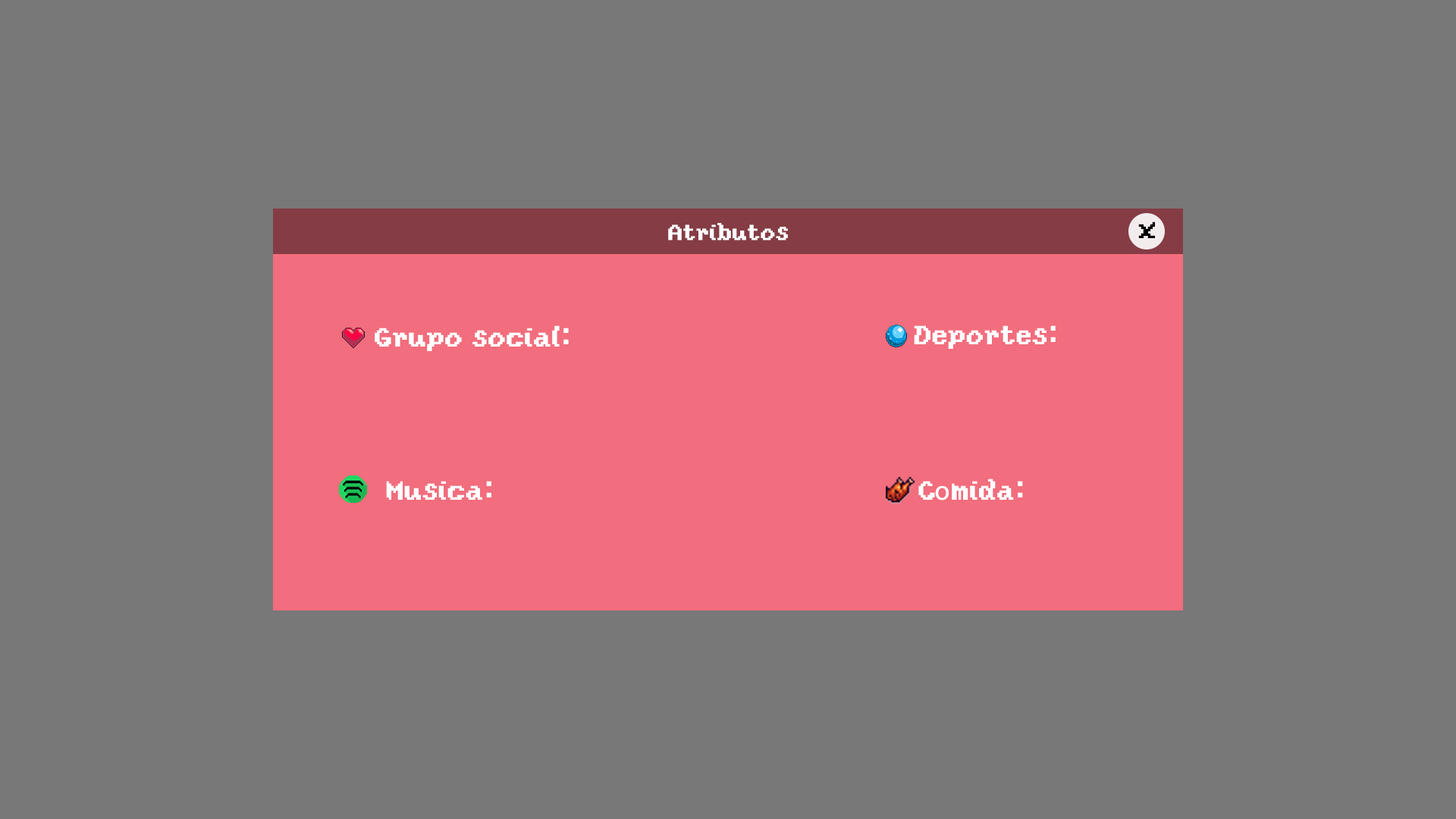
<style>
.page{position:relative;width:1456px;height:819px;background:#787878}
.page>*{position:absolute;margin:0}
.t1{font:27.3px "YosterIslandReg";color:#000000}
.t2{font:22.7px "YosterIslandReg";color:#ffffff}
.t3{font:27.3px "YosterIslandReg";color:#ffffff}
.t4{font:27.3px "MyriadPro-Regular";color:#ffffff}
</style>
<div class="page">
<p class="t1" style="left:1138px;top:221px;width:17px;height:17px">x</p>
<p class="t2" style="left:668px;top:223px;width:120px;height:17px">Atributos</p>
<p class="t3" style="left:375px;top:325px;width:194px;height:26px">Grupo social:</p>
<p class="t3" style="left:914px;top:325px;width:142px;height:24px">Deportes:</p>
<p class="t3" style="left:386px;top:481px;width:105px;height:19px">Musica:</p>
<p class="t3" style="left:918px;top:479px;width:105px;height:21px">C<span class="t4">o</span>mida:</p>
</div>
